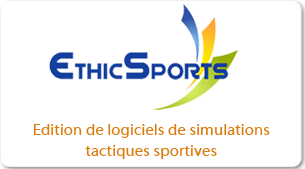
<style>
.page{position:relative;width:305px;height:169px;background:#ffffff}
.page>*{position:absolute;margin:0}
.t1{font:16px/20.4px "Myriad-Web";letter-spacing:0.005em;color:#da7b0b}
</style>
<div class="page">
<p class="t1" style="left:33px;top:124px;width:237px;height:35px;text-align:center">Edition de logiciels de simulations<br>tactiques sportives</p>
</div>
